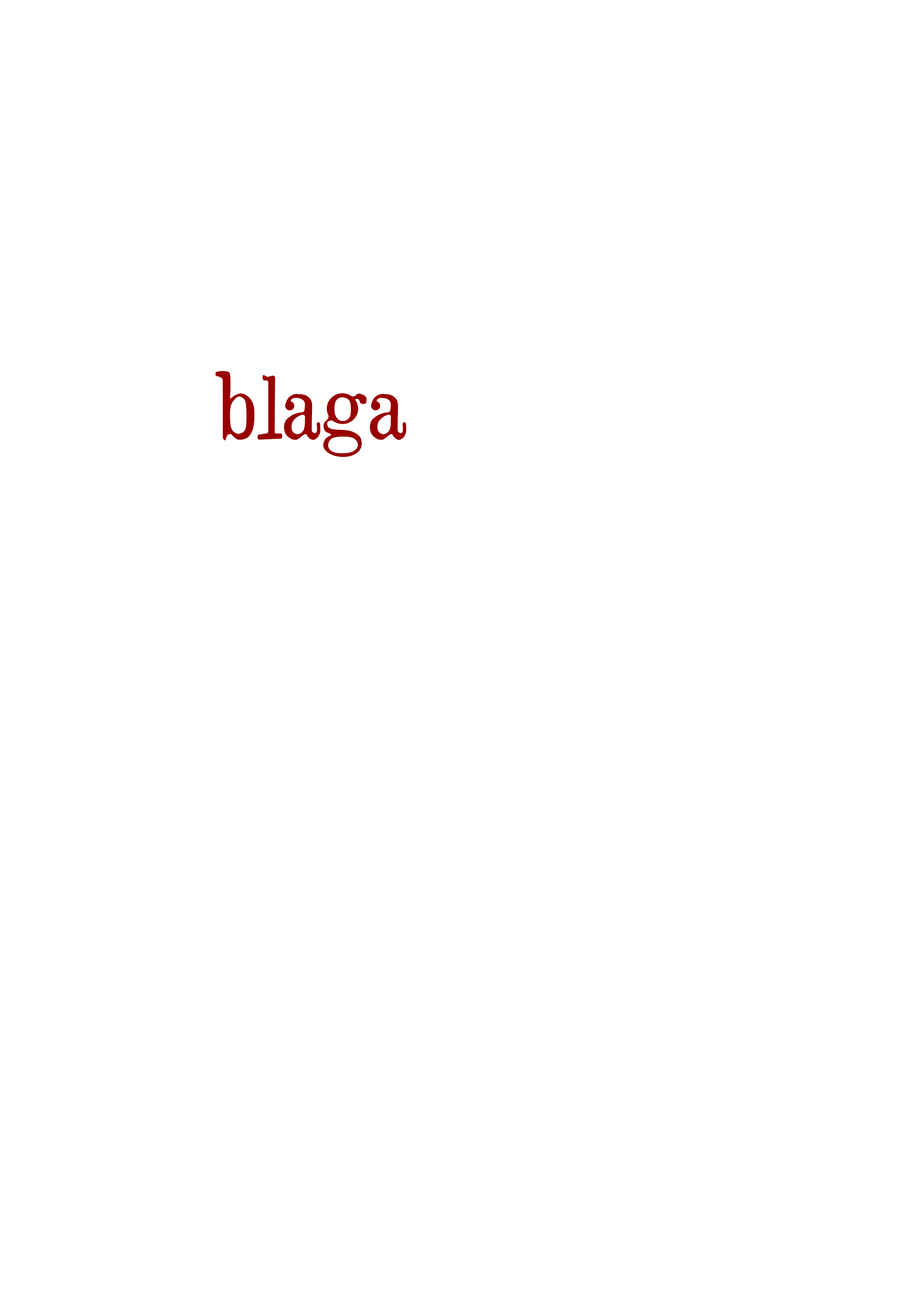
<style>
.page{position:relative;width:918px;height:1299px;background:#ffffff}
.page>*{position:absolute;margin:0}
.t1{font:74px "Brokgauz&Efron";letter-spacing:-0.025em;color:#990000}
</style>
<div class="page">
<p class="t1" style="left:215px;top:371px;width:192px;height:86px">blaga</p>
</div>
